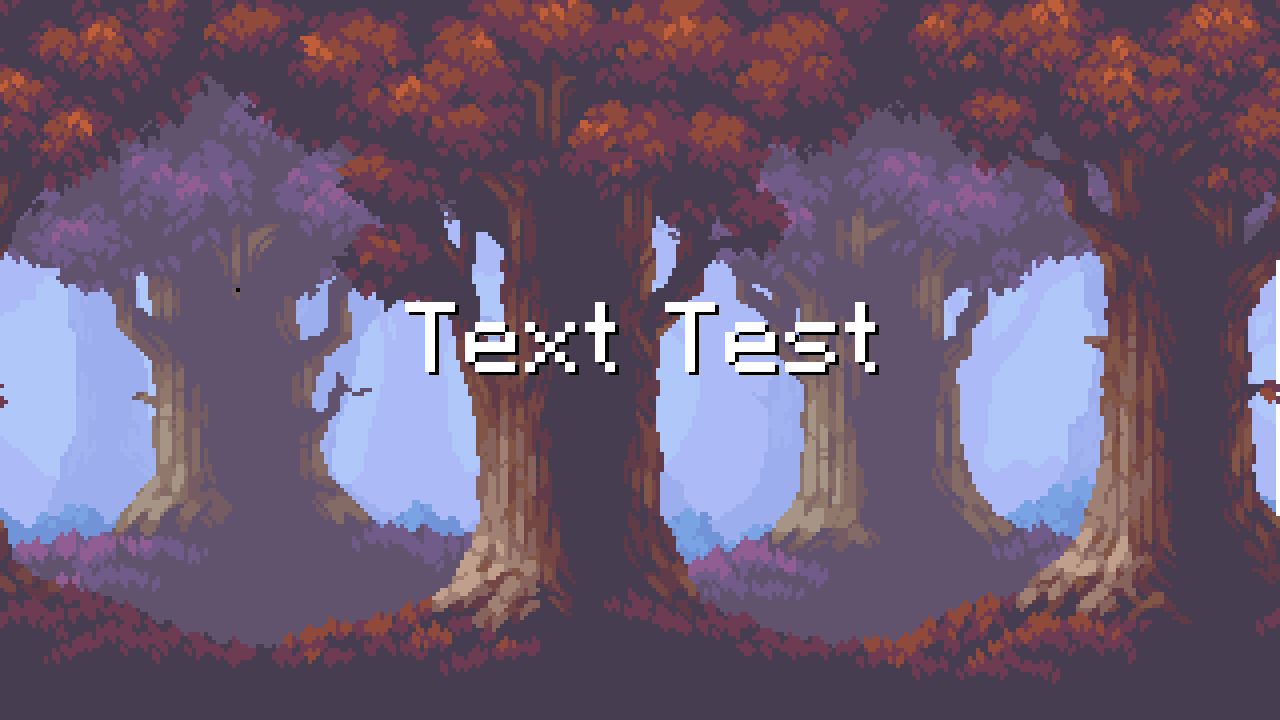
<style>
.page{position:relative;width:1280px;height:720px;background:#473d50}
.page>*{position:absolute;margin:0}
.t1{font:100px "Minecraft-Regular";color:#ffffff}
</style>
<div class="page">
<p class="t1" style="left:405px;top:302px;width:470px;height:70px">Text Test</p>
</div>
